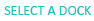
<style>
.page{position:relative;width:94px;height:21px;background:#ffffff}
.page>*{position:absolute;margin:0}
.t1{font:14px "Calibri";color:#1ebdbf}
</style>
<div class="page">
<p class="t1" style="left:4px;top:6px;width:88px;height:9px">SELECT A DOCK</p>
</div>
